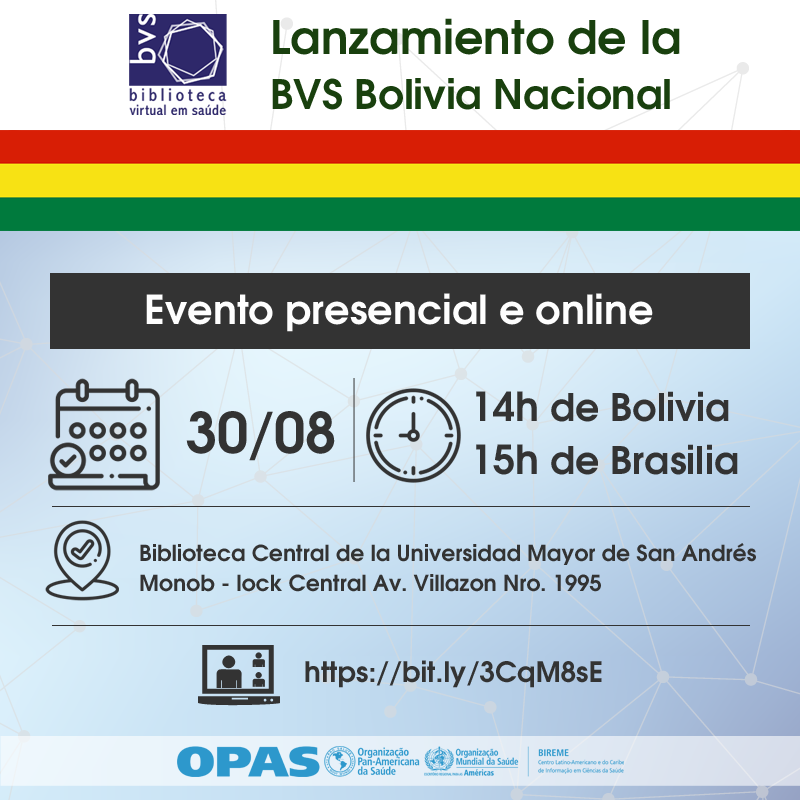
<style>
.page{position:relative;width:800px;height:800px}
.page>*{position:absolute;margin:0}
.t1{font:40.5px "TeXGyreAdventor-Bold";color:#19400e}
.t2{font:46px "TeXGyreAdventor-Bold";color:#19400e}
.t3{font:39.8px "TeXGyreAdventor-Bold";color:#fefefe}
.t4{font:38px "TeXGyreAdventor-Bold";color:#333333}
.t5{font:40px "TeXGyreAdventor-Bold";color:#333333}
.t6{font:56px "TeXGyreAdventor-Bold";color:#333333}
.t7{font:22px "TeXGyreAdventor-Bold";color:#333333}
.t8{font:28px "TeXGyreAdventor-Bold";color:#333333}
</style>
<div class="page">
<p class="t1" style="left:272px;top:18px;width:408px;height:92px"><span class="t2">Lanzamiento de la<br></span>BVS Bolivia Nacional</p>
<p class="t3" style="left:146px;top:293px;width:507px;height:39px">Evento presencial e online</p>
<p class="t4" style="left:476px;top:391px;width:262px;height:84px"><span class="t5">14h </span>de Bolivia<br><span class="t5">15h </span>de Brasilia</p>
<p class="t6" style="left:186px;top:411px;width:149px;height:50px">30/08</p>
<p class="t7" style="left:140px;top:543px;width:616px;height:49px">Biblioteca Central de la Universidad Mayor de San Andrés<br>Monob - lock Central Av. Villazon Nro. 1995</p>
<p class="t8" style="left:305px;top:660px;width:297px;height:28px">https://bit.ly/3CqM8sE</p>
</div>
